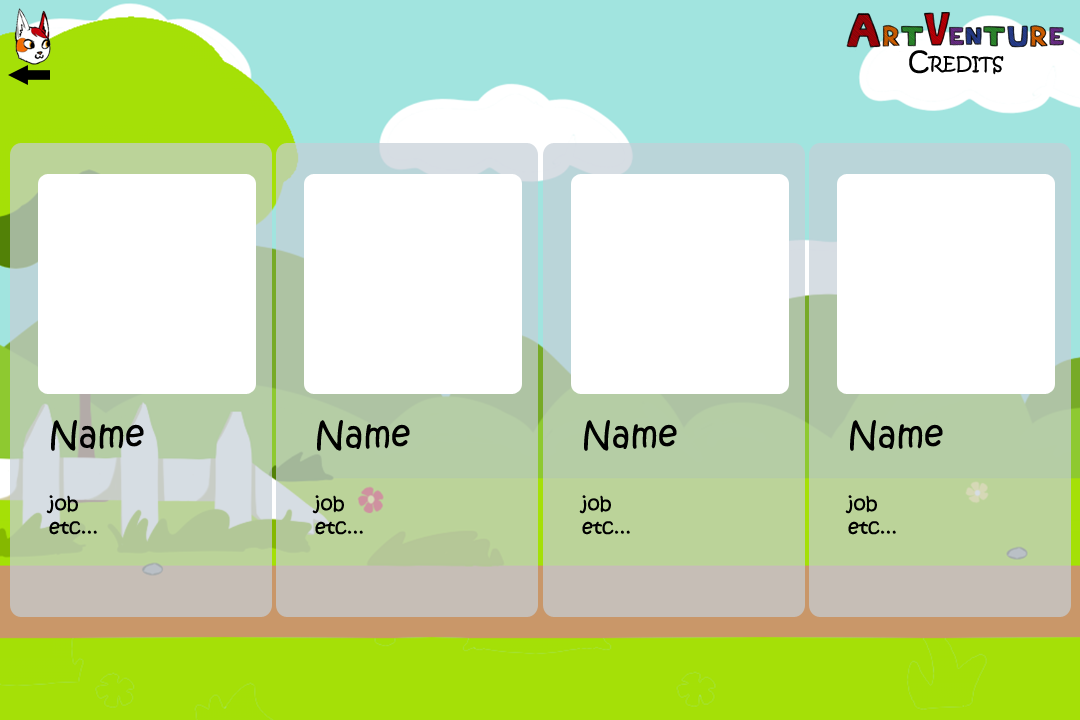
<style>
.page{position:relative;width:1080px;height:720px;background:#ffffff}
.page>*{position:absolute;margin:0}
.t1{font:25.7px "KristenITC-Regular";color:#000000;font-variant:small-caps}
.t2{font:19.4px "KristenITC-Regular";color:#000000}
.t3{font:34px "KristenITC-Regular";color:#000000}
</style>
<div class="page">
<p class="t1" style="left:909px;top:50px;width:95px;height:25px">Credits</p>
<p class="t2" style="left:46px;top:420px;width:98px;height:115px"><span class="t3">Name<br><br></span>job<br>etc...</p>
<p class="t2" style="left:312px;top:420px;width:98px;height:115px"><span class="t3">Name<br><br></span>job<br>etc...</p>
<p class="t2" style="left:579px;top:420px;width:98px;height:115px"><span class="t3">Name<br><br></span>job<br>etc...</p>
<p class="t2" style="left:845px;top:420px;width:98px;height:115px"><span class="t3">Name<br><br></span>job<br>etc...</p>
</div>
